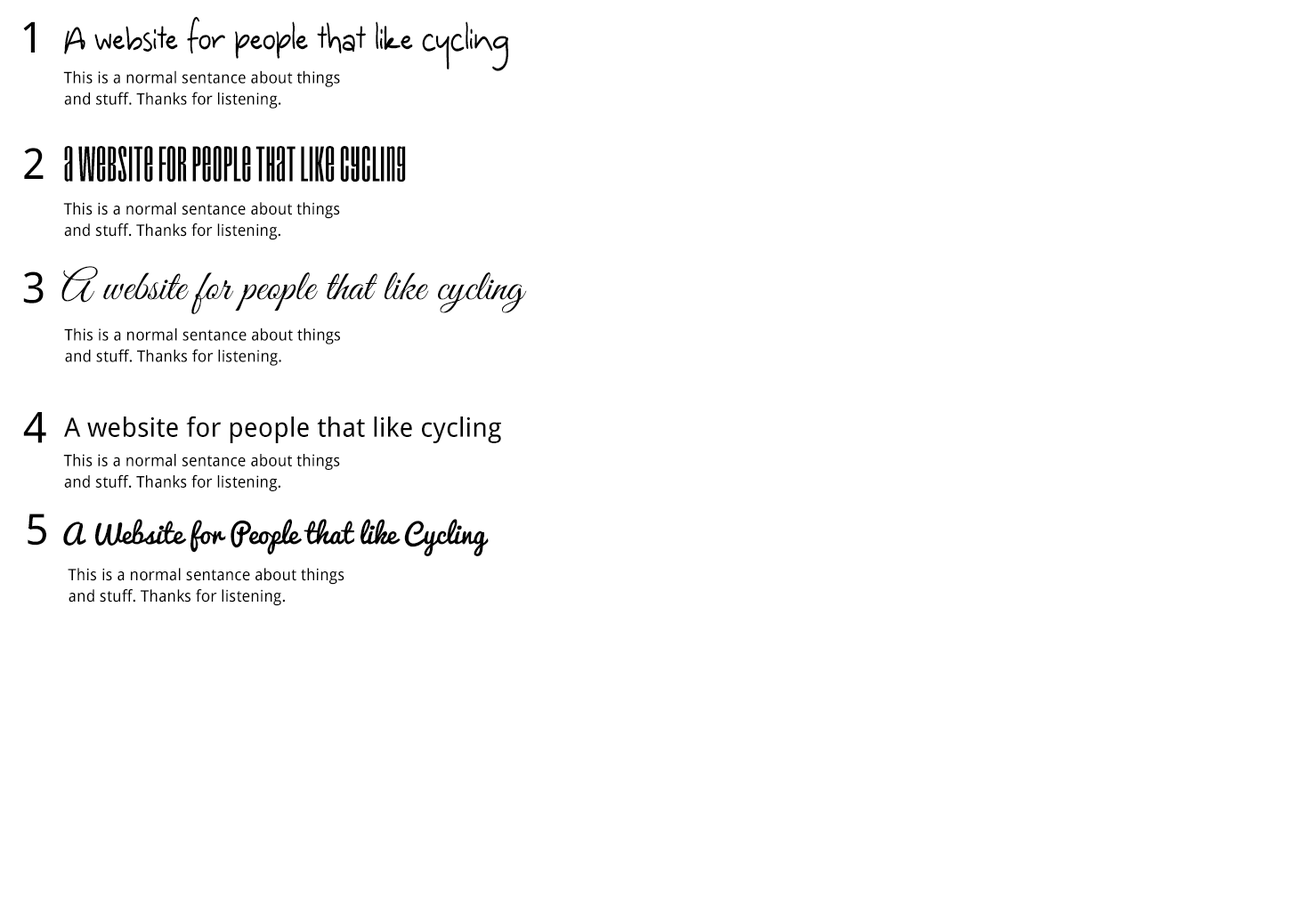
<style>
.page{position:relative;width:1304px;height:914px;background:#ffffff}
.page>*{position:absolute;margin:0}
.t1{font:42.7px "Dinosaur";letter-spacing:0.005em;color:#000000}
.t2{font:42.7px "DroidSans";color:#000000}
.t3{font:16px/21.4px "DroidSans";color:#000000}
.t4{font:42.7px "Droid-Regular";color:#000000}
.t5{font:42.7px "GreatVibes-Regular";color:#000000}
.t6{font:26.7px "DroidSans";color:#000000}
.t7{font:26.7px "Pacifico";letter-spacing:0.005em;color:#000000}
</style>
<div class="page">
<p class="t1" style="left:64px;top:17px;width:444px;height:54px">A website for people that like cycling</p>
<p class="t2" style="left:23px;top:21px;width:12px;height:32px">1</p>
<p class="t3" style="left:63px;top:70px;width:277px;height:39px">This is a normal sentance about things<br>and stuff. Thanks for listening.</p>
<p class="t2" style="left:24px;top:148px;width:20px;height:31px">2</p>
<p class="t4" style="left:64px;top:146px;width:342px;height:37px">A website for people that like cycling</p>
<p class="t3" style="left:63px;top:202px;width:277px;height:38px">This is a normal sentance about things<br>and stuff. Thanks for listening.</p>
<p class="t5" style="left:61px;top:266px;width:466px;height:48px">A website for people that like cycling</p>
<p class="t2" style="left:23px;top:272px;width:21px;height:32px">3</p>
<p class="t3" style="left:64px;top:328px;width:276px;height:38px">This is a normal sentance about things<br>and stuff. Thanks for listening.</p>
<p class="t2" style="left:23px;top:412px;width:23px;height:31px">4</p>
<p class="t6" style="left:64px;top:416px;width:437px;height:27px">A website for people that like cycling</p>
<p class="t3" style="left:63px;top:454px;width:277px;height:37px">This is a normal sentance about things<br>and stuff. Thanks for listening.</p>
<p class="t2" style="left:28px;top:514px;width:18px;height:32px">5</p>
<p class="t7" style="left:63px;top:519px;width:426px;height:37px">A Website for People that like Cycling</p>
<p class="t3" style="left:68px;top:568px;width:277px;height:38px">This is a normal sentance about things<br>and stuff. Thanks for listening.</p>
</div>
